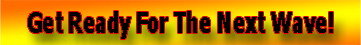
<style>
.page{position:relative;width:361px;height:45px;background:#000000}
.page>*{position:absolute;margin:0}
.t1{font:28.7px "Tahoma-Bold";color:#000000;scale:0.7 1}
</style>
<div class="page">
<p class="t1" style="left:28px;top:11px;width:305px;height:28px">Get Ready For The Next Wave!</p>
</div>
